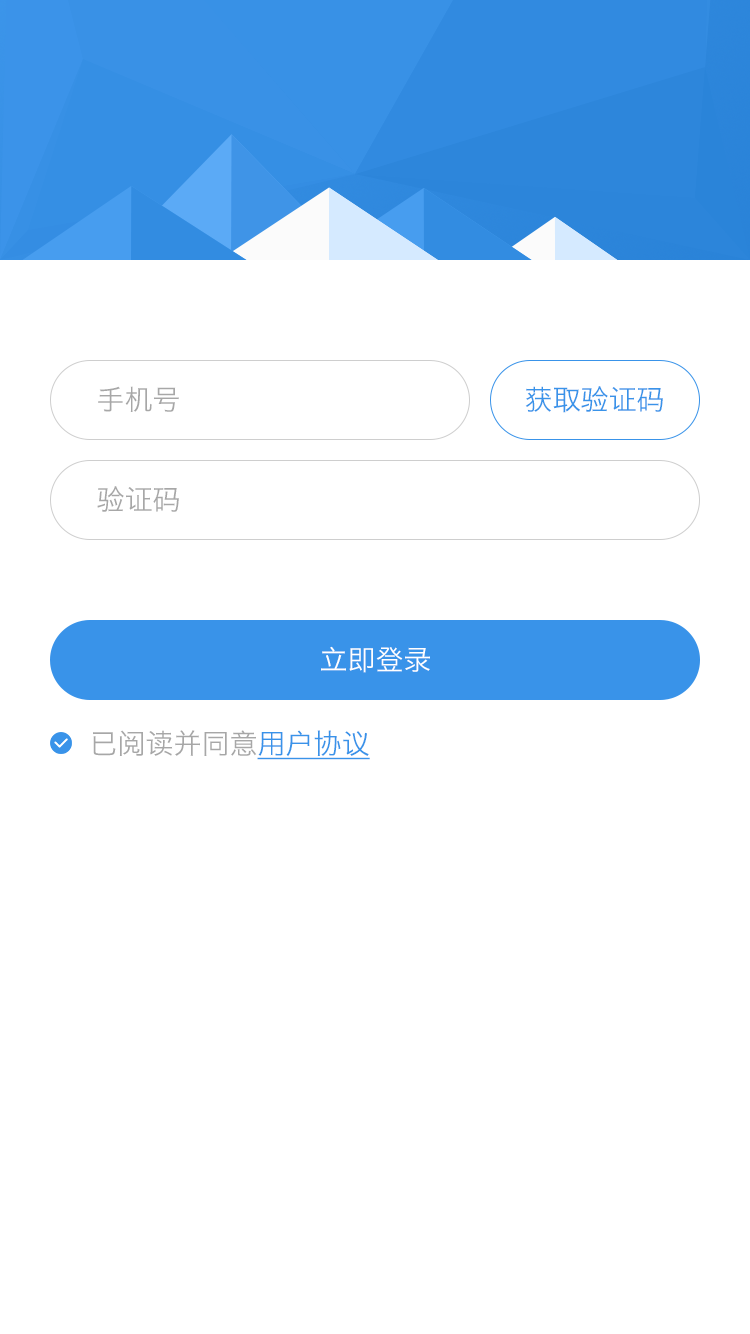
<style>
.page{position:relative;width:750px;height:1334px;background:#ffffff}
.page>*{position:absolute;margin:0}
.t1{font:28px "HiraginoSansGB-W3";color:#a7a7a7}
.t2{font:28px "HiraginoSansGB-W3";color:#3993e9}
.t3{font:28px "HiraginoSansGB-W3";color:#ffffff}
.t4{font:28px "HiraginoSansGB-W3";color:#3993e9;text-decoration:underline}
</style>
<div class="page">
<p class="t1" style="left:98px;top:386px;width:81px;height:26px">手机号</p>
<p class="t2" style="left:525px;top:386px;width:138px;height:27px">获取验证码</p>
<p class="t1" style="left:97px;top:486px;width:82px;height:26px">验证码</p>
<p class="t3" style="left:321px;top:646px;width:109px;height:27px">立即登录</p>
<p class="t1" style="left:93px;top:730px;width:277px;height:30px">已阅读并同意<span class="t4">用户协议</span></p>
</div>
